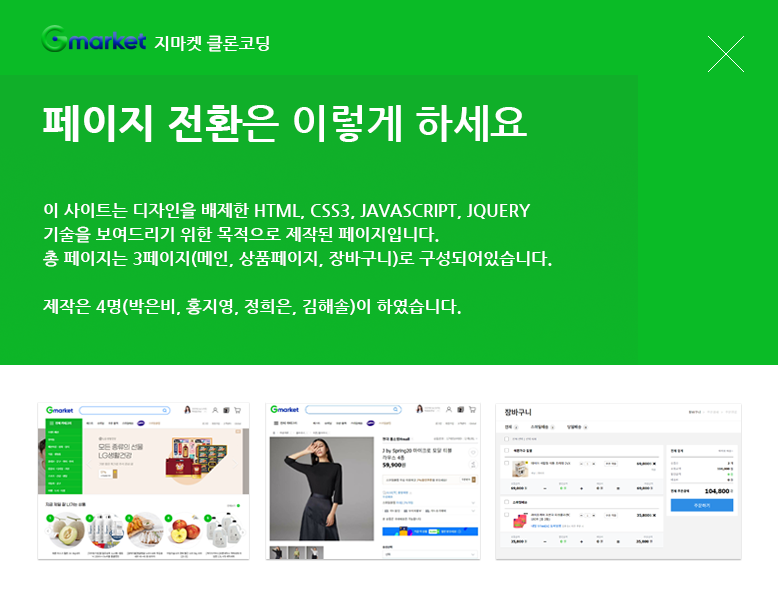
<style>
.page{position:relative;width:778px;height:589px;background:#ffffff}
.page>*{position:absolute;margin:0}
.t1{font:17px "NanumGothicBold";color:#ffffff}
.t2{font:40px "NanumGothicBold";color:#ffffff}
.t3{font:40px "NanumGothicExtraBold";color:#ffffff}
.t4{font:17px/24px "NanumGothicBold";color:#ffffff}
</style>
<div class="page">
<p class="t1" style="left:154px;top:35px;width:115px;height:17px">지마켓 클론코딩</p>
<p class="t2" style="left:43px;top:105px;width:484px;height:37px"><span class="t3">페이지 전환</span>은 이렇게 하세요</p>
<p class="t4" style="left:43px;top:202px;width:509px;height:113px">이 사이트는 디자인을 배제한 HTML, CSS3, JAVASCRIPT, JQUERY<br>기술을 보여드리기 위한 목적으로 제작된 페이지입니다.<br>총 페이지는 3페이지(메인, 상품페이지, 장바구니)로 구성되어있습니다.<br><br>제작은 4명(박은비, 홍지영, 정희은, 김해솔)이 하였습니다.</p>
</div>
